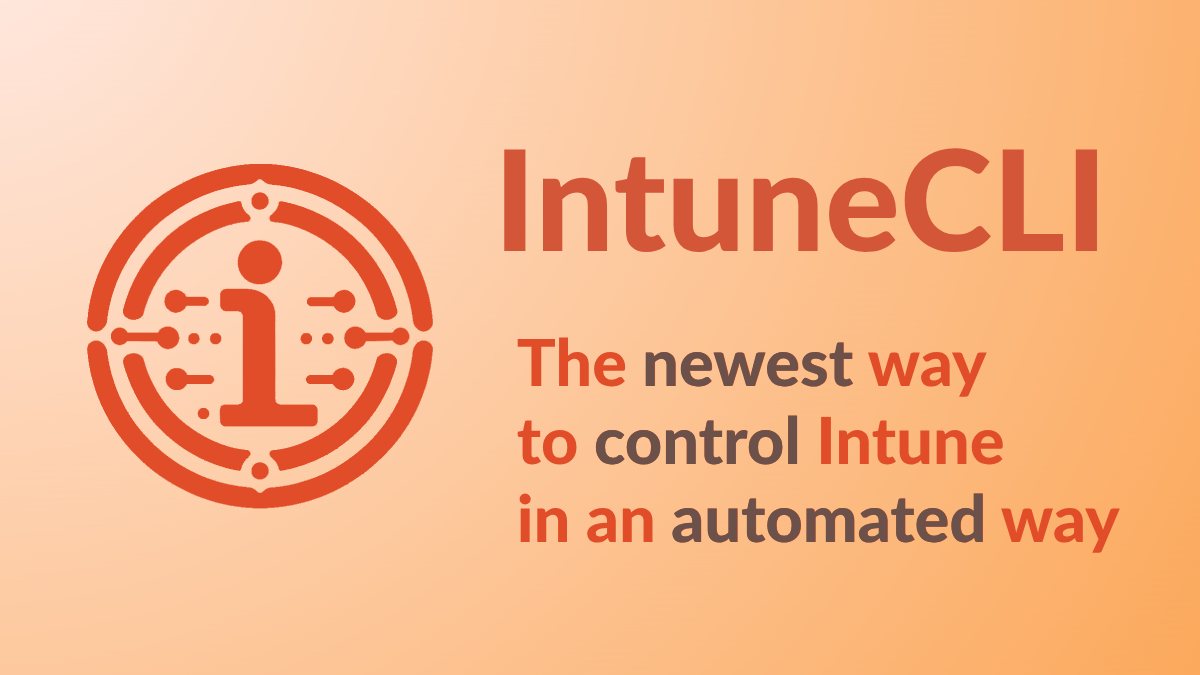
<style>
.page{position:relative;width:1200px;height:675px}
.page>*{position:absolute;margin:0}
.t1{font:140px "Lato-Heavy";color:#d25637}
.t2{font:64.9px "Lato-Heavy";color:#d25637}
.t3{font:64.9px "Lato-Heavy";color:#6c514a}
</style>
<div class="page">
<p class="t1" style="left:504px;top:148px;width:593px;height:105px">IntuneCLI</p>
<p class="t2" style="left:517px;top:337px;width:603px;height:216px">The <span class="t3">newest</span> way <br>to control Intune <br>in an automated way</p>
<p class="t3" style="left:645px;top:342px;width:208px;height:45px">newest</p>
<p class="t3" style="left:595px;top:415px;width:203px;height:50px">control</p>
<p class="t3" style="left:672px;top:493px;width:311px;height:50px">automated</p>
</div>
